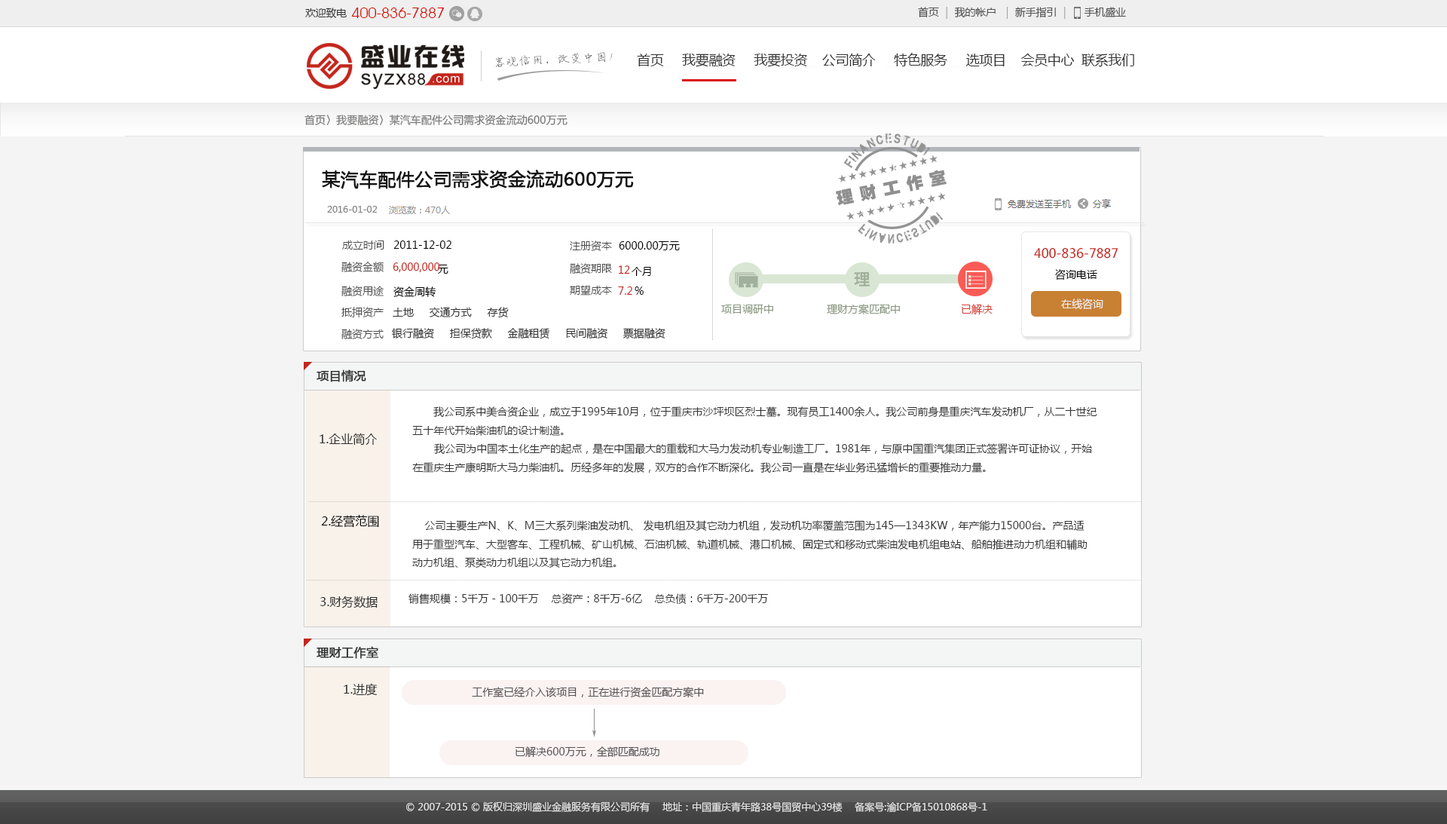
<style>
.page{position:relative;width:1447px;height:824px;background:#ffffff}
.page>*{position:absolute;margin:0}
.t1{font:10.6px "MicrosoftYaHei";letter-spacing:-0.02em;color:#333333}
.t2{font:15.2px "AvantGardeITCbyBT-Book";letter-spacing:-0.02em;color:#d60c00}
.t3{font:10.6px "MicrosoftYaHei";letter-spacing:-0.02em;color:#505050}
.t4{font:10.6px "MicrosoftYaHei";color:#777777}
.t5{font:18.1px "MicrosoftYaHei";color:#131313;font-weight:bold}
.t6{font:9px "MicrosoftYaHei";color:#808080}
.t7{font:10.6px "MicrosoftYaHei";color:#4c4c4c}
.t8{font:10.6px "MicrosoftYaHei";color:#000000}
.t9{font:12.9px "MicrosoftYaHei";color:#c4261d}
.t10{font:10.6px "MicrosoftYaHei";color:#c4261b}
.t11{font:10.6px "MicrosoftYaHei";color:#c6261a}
.t12{font:16.7px "HYb2gj";color:#a1b09b}
.t13{font:10.6px "MicrosoftYaHei";color:#c3261d}
.t14{font:10.6px "MicrosoftYaHei";color:#87967e}
.t15{font:10.6px "MicrosoftYaHei";color:#d04035}
.t16{font:10.6px "MicrosoftYaHei";color:#efefef}
.t17{font:10.6px "MicrosoftYaHei";color:#333333}
.t18{font:12.1px "MicrosoftYaHei";color:#313232;font-weight:bold}
.t19{font:12.1px "MicrosoftYaHei";color:#32312f}
.t20{font:12.1px "MicrosoftYaHei";color:#000000}
.t21{font:10.6px "MicrosoftYaHei";color:#565353}
.t22{font:9.8px "MicrosoftYaHei";color:#e3e3e3}
</style>
<div class="page">
<p class="t1" style="left:305px;top:8px;width:42px;height:10px">欢迎致电</p>
<p class="t2" style="left:351px;top:8px;width:93px;height:10px">400-836-7887</p>
<p class="t3" style="left:918px;top:7px;width:208px;height:12px">首页 ｜ 我的帐户  ｜ 新手指引 ｜     手机盛业</p>
<p class="t4" style="left:305px;top:115px;width:263px;height:11px">首页〉我要融资〉某汽车配件公司需求资金流动600万元</p>
<p class="t5" style="left:322px;top:170px;width:312px;height:19px">某汽车配件公司需求资金流动600万元</p>
<p class="t6" style="left:327px;top:206px;width:51px;height:7px">2016-01-02</p>
<p class="t7" style="left:342px;top:240px;width:42px;height:10px">成立时间</p>
<p class="t8" style="left:393px;top:240px;width:59px;height:9px">2011-12-02</p>
<p class="t7" style="left:570px;top:240px;width:42px;height:11px">注册资本</p>
<p class="t8" style="left:619px;top:241px;width:61px;height:9px">6000.00万元</p>
<p class="t9" style="left:1034px;top:247px;width:85px;height:12px">400-836-7887</p>
<p class="t7" style="left:341px;top:262px;width:43px;height:10px">融资金额</p>
<p class="t10" style="left:393px;top:262px;width:47px;height:11px">6,000,000</p>
<p class="t8" style="left:438px;top:265px;width:11px;height:9px">元</p>
<p class="t7" style="left:570px;top:263px;width:42px;height:11px">融资期限</p>
<p class="t11" style="left:619px;top:265px;width:11px;height:9px">12</p>
<p class="t8" style="left:631px;top:267px;width:20px;height:9px">个月</p>
<p class="t8" style="left:1055px;top:269px;width:43px;height:11px">咨询电话</p>
<p class="t12" style="left:854px;top:272px;width:16px;height:14px">理</p>
<p class="t7" style="left:341px;top:286px;width:43px;height:10px">融资用途</p>
<p class="t8" style="left:393px;top:286px;width:43px;height:11px">资金周转</p>
<p class="t7" style="left:570px;top:285px;width:42px;height:10px">期望成本</p>
<p class="t13" style="left:618px;top:286px;width:14px;height:9px">7.2</p>
<p class="t8" style="left:635px;top:286px;width:9px;height:9px">%</p>
<p class="t14" style="left:721px;top:305px;width:52px;height:9px">项目调研中</p>
<p class="t14" style="left:827px;top:304px;width:73px;height:11px">理财方案匹配中</p>
<p class="t15" style="left:962px;top:304px;width:31px;height:11px">已解决</p>
<p class="t16" style="left:1061px;top:299px;width:43px;height:11px">在线咨询</p>
<p class="t7" style="left:341px;top:307px;width:43px;height:10px">抵押资产</p>
<p class="t17" style="left:393px;top:307px;width:116px;height:11px">土地     交通方式     存货</p>
<p class="t7" style="left:341px;top:329px;width:43px;height:10px">融资方式</p>
<p class="t17" style="left:392px;top:328px;width:274px;height:11px">银行融资     担保贷款     金融租赁     民间融资     票据融资</p>
<p class="t18" style="left:317px;top:369px;width:49px;height:13px">项目情况</p>
<p class="t17" style="left:412px;top:406px;width:686px;height:67px">我公司系中美合资企业，成立于1995年10月，位于重庆市沙坪坝区烈士墓。现有员工1400余人。我公司前身是重庆汽车发动机厂，从二十世纪五十年代开始柴油机的设计制造。<br>       我公司为中国本土化生产的起点，是在中国最大的重载和大马力发动机专业制造工厂。1981年，与原中国重汽集团正式签署许可证协议，开始在重庆生产康明斯大马力柴油机。历经多年的发展，双方的合作不断深化。我公司一直是在华业务迅猛增长的重要推动力量。</p>
<p class="t19" style="left:320px;top:433px;width:57px;height:12px">1.企业简介</p>
<p class="t20" style="left:321px;top:515px;width:58px;height:13px">2.经营范围</p>
<p class="t17" style="left:412px;top:520px;width:676px;height:48px">公司主要生产N、K、M三大系列柴油发动机、 发电机组及其它动力机组，发动机功率覆盖范围为145—1343KW，年产能力15000台。产品适用于重型汽车、大型客车、工程机械、矿山机械、石油机械、轨道机械、港口机械、固定式和移动式柴油发电机组电站、船舶推进动力机组和辅助动力机组、泵类动力机组以及其它动力机组。</p>
<p class="t17" style="left:409px;top:593px;width:359px;height:12px">销售规模：5千万－100千万    总资产：8千万-6亿    总负债：6千万-200千万</p>
<p class="t19" style="left:320px;top:596px;width:58px;height:12px">3.财务数据</p>
<p class="t18" style="left:317px;top:646px;width:61px;height:13px">理财工作室</p>
<p class="t19" style="left:344px;top:683px;width:33px;height:13px">1.进度</p>
<p class="t21" style="left:472px;top:687px;width:232px;height:11px">工作室已经介入该项目，正在进行资金匹配方案中</p>
<p class="t21" style="left:516px;top:746px;width:144px;height:12px">已解决600万元，全部匹配成功</p>
<p class="t22" style="left:406px;top:801px;width:581px;height:12px">© 2007-2015 © 版权归深圳盛业金融服务有限公司所有　 地址：中国重庆青年路38号国贸中心39楼 　备案号:渝ICP备15010868号-1</p>
</div>
